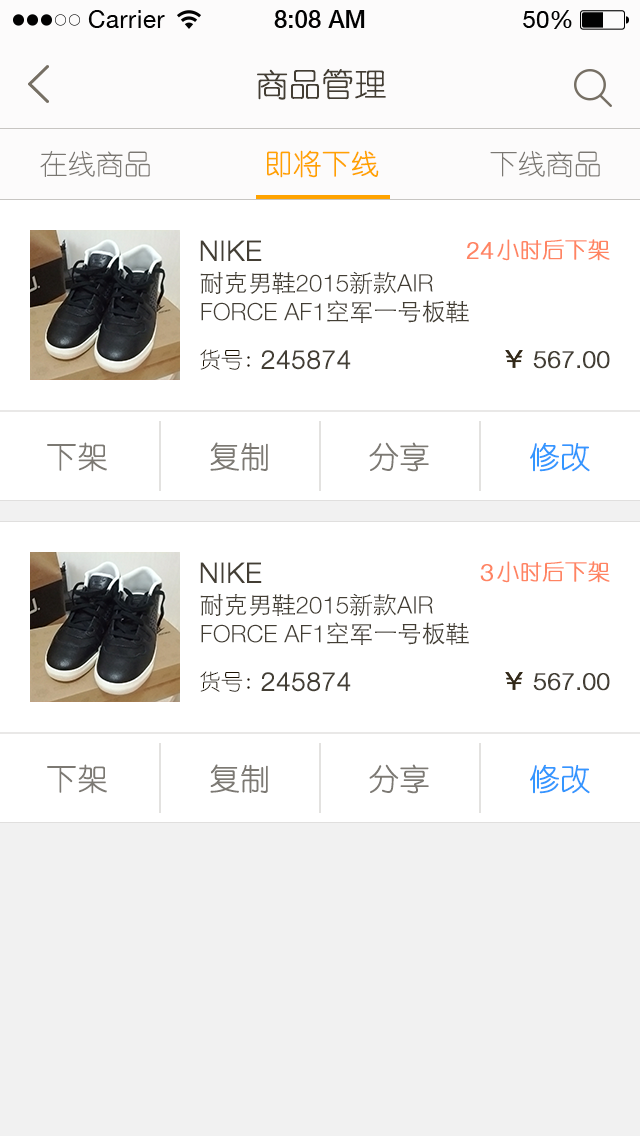
<style>
.page{position:relative;width:640px;height:1136px;background:#ffffff}
.page>*{position:absolute;margin:0}
.t1{font:32px "YouYuan";color:#433d33;text-transform:uppercase;font-weight:bold}
.t2{font:28px "YouYuan";color:#7a7772;text-transform:uppercase}
.t3{font:28px "YouYuan";color:#ffa300;text-transform:uppercase;font-weight:bold}
.t4{font:28px "HelveticaNeueLTPro-Lt";color:#433e34;text-transform:uppercase;font-weight:bold}
.t5{font:24px "HelveticaNeueLTPro-Lt";color:#ff8462;text-transform:uppercase;font-weight:bold}
.t6{font:22px "YouYuan";color:#ff8462;text-transform:uppercase;font-weight:bold}
.t7{font:24px "HelveticaNeueLTPro-Lt";color:#433e34;text-transform:uppercase}
.t8{font:24px "STHeitiSC-Light";color:#433e34;text-transform:uppercase}
.t9{font:22px "YouYuan";color:#1b1100;text-transform:uppercase}
.t10{font:26px "HelveticaNeueLTPro-Lt";color:#433e34;text-transform:uppercase;font-weight:bold}
.t11{font:24px "HelveticaNeueLTPro-Lt";color:#433e34;text-transform:uppercase;font-weight:bold}
.t12{font:30px "YouYuan";color:#7c7973;text-transform:uppercase;font-weight:bold}
.t13{font:30px "YouYuan";color:#3496ff;text-transform:uppercase;font-weight:bold}
</style>
<div class="page">
<p class="t1" style="left:257px;top:69px;width:129px;height:31px">商品管理</p>
<p class="t2" style="left:40px;top:150px;width:110px;height:28px">在线商品</p>
<p class="t3" style="left:267px;top:150px;width:112px;height:28px">即将下线</p>
<p class="t2" style="left:490px;top:150px;width:110px;height:28px">下线商品</p>
<p class="t4" style="left:200px;top:240px;width:62px;height:21px">NIKE</p>
<p class="t5" style="left:466px;top:242px;width:28px;height:17px">24</p>
<p class="t6" style="left:497px;top:239px;width:113px;height:22px">小时后下架</p>
<p class="t7" style="left:200px;top:271px;width:269px;height:52px"><span class="t8">耐克男鞋</span>2015<span class="t8">新款</span>air force AF1<span class="t8">空军一号板鞋</span></p>
<p class="t9" style="left:200px;top:349px;width:50px;height:21px">货号:</p>
<p class="t10" style="left:261px;top:350px;width:90px;height:20px">245874</p>
<p class="t11" style="left:533px;top:351px;width:77px;height:18px">567.00</p>
<p class="t12" style="left:47px;top:442px;width:60px;height:30px">下架</p>
<p class="t12" style="left:210px;top:442px;width:58px;height:29px">复制</p>
<p class="t12" style="left:369px;top:442px;width:60px;height:30px">分享</p>
<p class="t13" style="left:530px;top:442px;width:60px;height:30px">修改</p>
<p class="t4" style="left:200px;top:562px;width:62px;height:21px">NIKE</p>
<p class="t5" style="left:480px;top:564px;width:13px;height:18px">3</p>
<p class="t6" style="left:497px;top:561px;width:113px;height:22px">小时后下架</p>
<p class="t7" style="left:200px;top:593px;width:269px;height:52px"><span class="t8">耐克男鞋</span>2015<span class="t8">新款</span>air force AF1<span class="t8">空军一号板鞋</span></p>
<p class="t9" style="left:200px;top:671px;width:50px;height:21px">货号:</p>
<p class="t10" style="left:261px;top:672px;width:90px;height:20px">245874</p>
<p class="t11" style="left:533px;top:673px;width:77px;height:18px">567.00</p>
<p class="t12" style="left:47px;top:764px;width:60px;height:30px">下架</p>
<p class="t12" style="left:210px;top:764px;width:58px;height:29px">复制</p>
<p class="t12" style="left:369px;top:764px;width:60px;height:30px">分享</p>
<p class="t13" style="left:530px;top:764px;width:60px;height:30px">修改</p>
</div>
